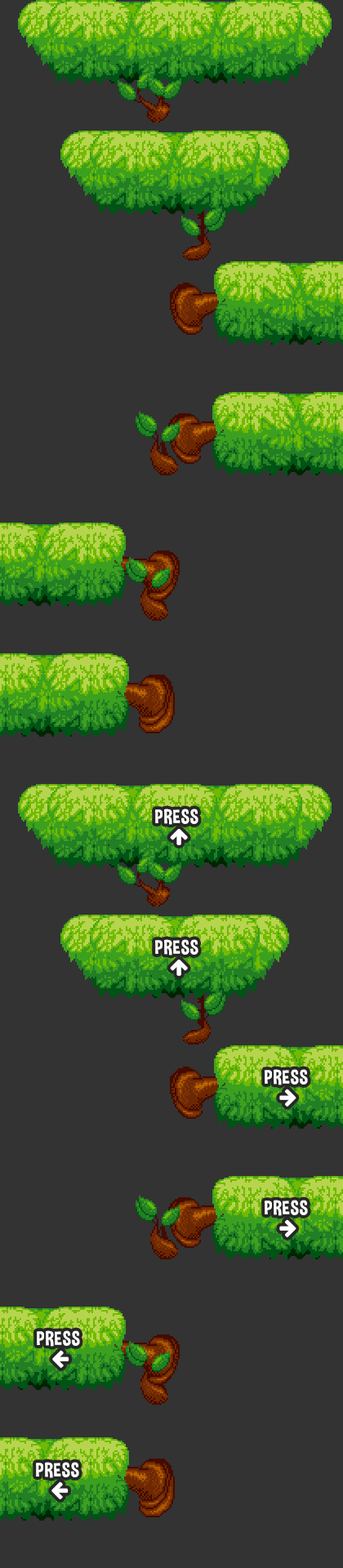
<style>
.page{position:relative;width:343px;height:1568px;background:#333333}
.page>*{position:absolute;margin:0}
.t1{font:19.6px "DimboRegular";letter-spacing:0.025em;color:#ffffff;text-transform:uppercase}
</style>
<div class="page">
<p class="t1" style="left:155px;top:808px;width:43px;height:17px">PRESS</p>
<p class="t1" style="left:155px;top:939px;width:43px;height:17px">PRESS</p>
<p class="t1" style="left:265px;top:1069px;width:43px;height:16px">PRESS</p>
<p class="t1" style="left:265px;top:1200px;width:43px;height:16px">PRESS</p>
<p class="t1" style="left:37px;top:1330px;width:43px;height:17px">PRESS</p>
<p class="t1" style="left:36px;top:1462px;width:43px;height:16px">PRESS</p>
</div>
